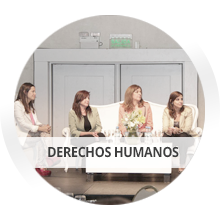
<style>
.page{position:relative;width:220px;height:220px;background:#ffffff}
.page>*{position:absolute;margin:0}
.t1{font:14px "OpenSans-Bold";letter-spacing:-0.025em;color:#3d3d3d;scale:0.9 1}
</style>
<div class="page">
<p class="t1" style="left:48px;top:146px;width:131px;height:12px">DERECHOS HUMANOS</p>
</div>
